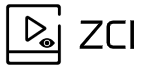
<style>
.page{position:relative;width:150px;height:69px;background:#ffffff}
.page>*{position:absolute;margin:0}
.t1{font:37.9px "Prime-Regular";color:#000000}
</style>
<div class="page">
<p class="t1" style="left:79px;top:20px;width:55px;height:29px">ZCI</p>
</div>
